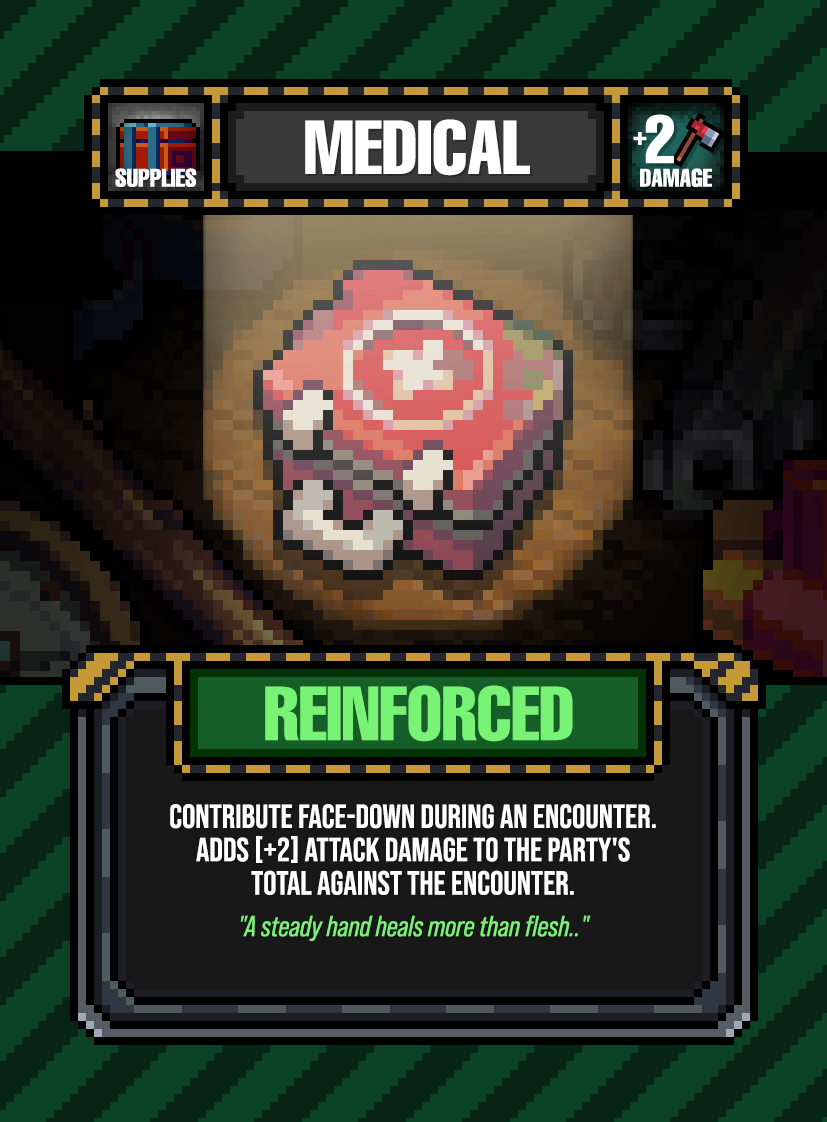
<style>
.page{position:relative;width:827px;height:1122px}
.page>*{position:absolute;margin:0}
.t1{font:75px "HelveticaLTPro-Compressed";color:#ffffff}
.t2{font:75px "HelveticaLTPro-Compressed";color:#79f376}
.t3{font:33.3px/33.3px "BebasNeue-Regular";color:#ffffff}
.t4{font:29.2px/33.3px "BebasNeuePro-Italic";color:#79f376}
</style>
<div class="page">
<p class="t1" style="left:305px;top:119px;width:225px;height:57px">MEDICAL</p>
<p class="t2" style="left:265px;top:685px;width:308px;height:57px">REINFORCED</p>
<p class="t3" style="left:170px;top:804px;width:486px;height:138px;text-align:center">CONTRIBUTE FACE-DOWN DURING AN ENCOUNTER.<br>ADDS [+2] ATTACK DAMAGE TO THE PARTY'S<br>TOTAL AGAINST THE encounter.<br><br><span class="t4">"A steady hand heals more than flesh.."</span></p>
</div>
